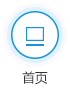
<style>
.page{position:relative;width:70px;height:94px;background:#ffffff}
.page>*{position:absolute;margin:0}
.t1{font:13px "MicrosoftYaHei";color:#323232}
</style>
<div class="page">
<p class="t1" style="left:22px;top:71px;width:26px;height:14px">首页</p>
</div>
